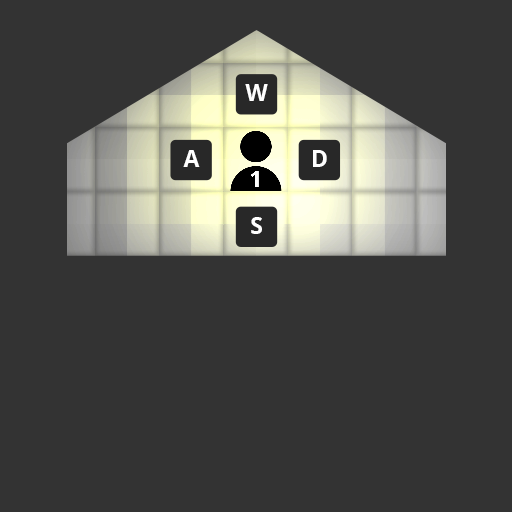
<style>
.page{position:relative;width:512px;height:512px;background:#333333}
.page>*{position:absolute;margin:0}
.t1{font:23.2px "NotoSans-Bold";color:#ffffff}
</style>
<div class="page">
<p class="t1" style="left:245px;top:84px;width:23px;height:17px">W</p>
<p class="t1" style="left:183px;top:150px;width:17px;height:17px">A</p>
<p class="t1" style="left:313px;top:150px;width:14px;height:17px">D</p>
<p class="t1" style="left:251px;top:217px;width:11px;height:17px">S</p>
</div>
